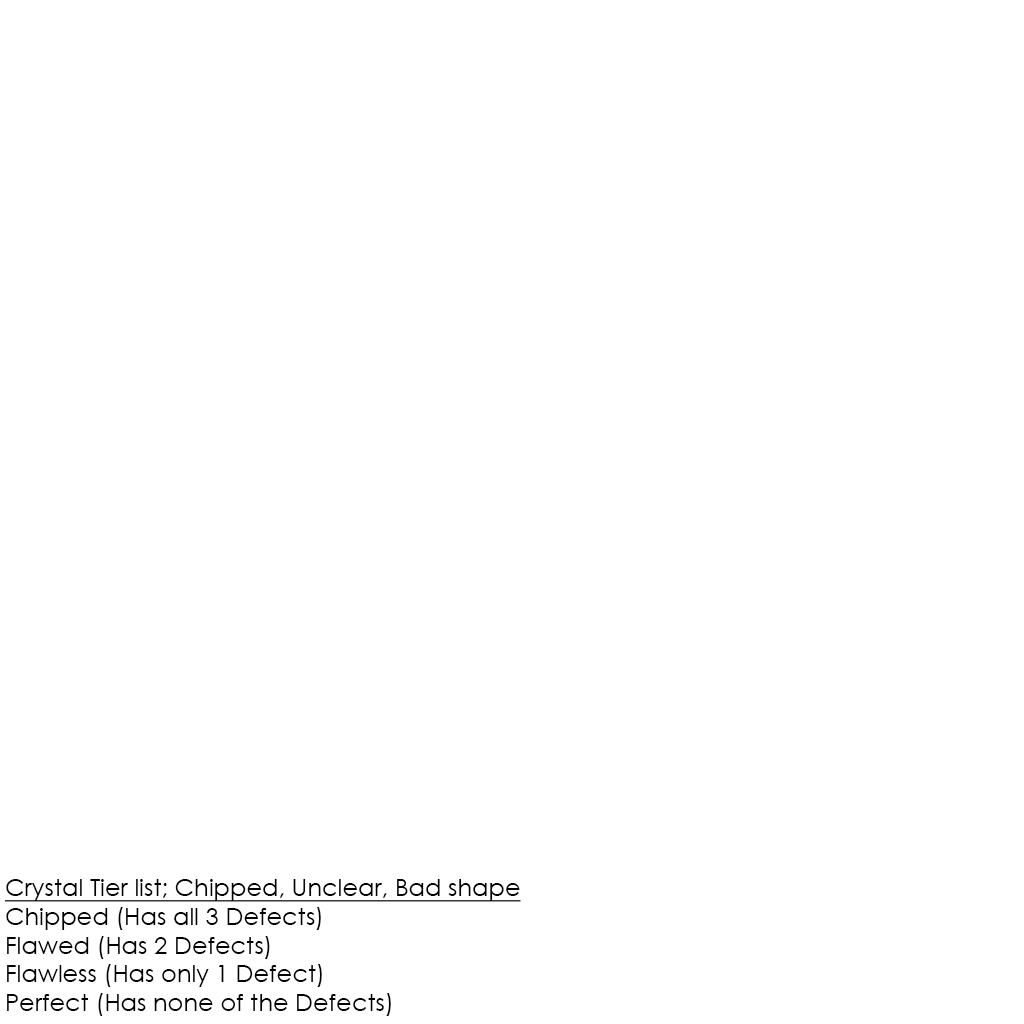
<style>
.page{position:relative;width:1024px;height:1024px;background:#ffffff}
.page>*{position:absolute;margin:0}
.t1{font:24px "CenturyGothic";color:#000000}
.t2{font:24px "CenturyGothic";color:#000000;text-decoration:underline}
</style>
<div class="page">
<p class="t1" style="left:5px;top:879px;width:516px;height:137px"><span class="t2">Crystal Tier list; Chipped, Unclear, Bad shape<br></span>Chipped (Has all 3 Defects)<br>Flawed (Has 2 Defects)<br>Flawless (Has only 1 Defect)<br>Perfect (Has none of the Defects)</p>
</div>
